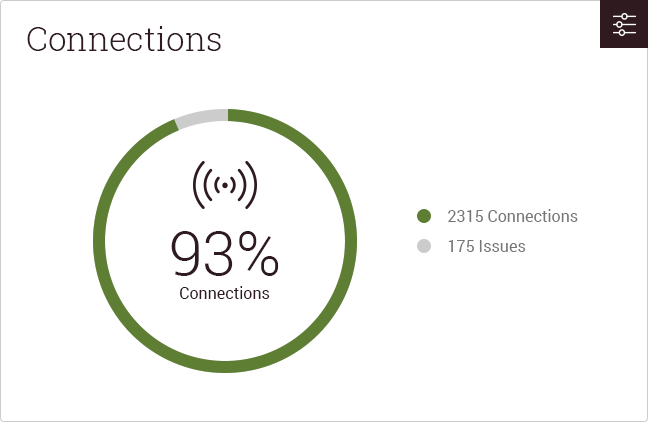
<style>
.page{position:relative;width:648px;height:422px;background:#ffffff}
.page>*{position:absolute;margin:0}
.t1{font:33px "RobotoSlab-Light";color:#2f1b1f}
.t2{font:16px "Roboto-Regular";color:#767676}
.t3{font:61px "Roboto-Light";color:#2f1b1f}
.t4{font:16px "Roboto-Regular";color:#2f1b1f}
</style>
<div class="page">
<p class="t1" style="left:27px;top:26px;width:194px;height:25px">Connections</p>
<p class="t2" style="left:448px;top:209px;width:130px;height:13px">2315 Connections</p>
<p class="t3" style="left:171px;top:231px;width:108px;height:45px">93%</p>
<p class="t2" style="left:448px;top:240px;width:78px;height:12px">175 Issues</p>
<p class="t4" style="left:180px;top:286px;width:90px;height:13px">Connections</p>
</div>
